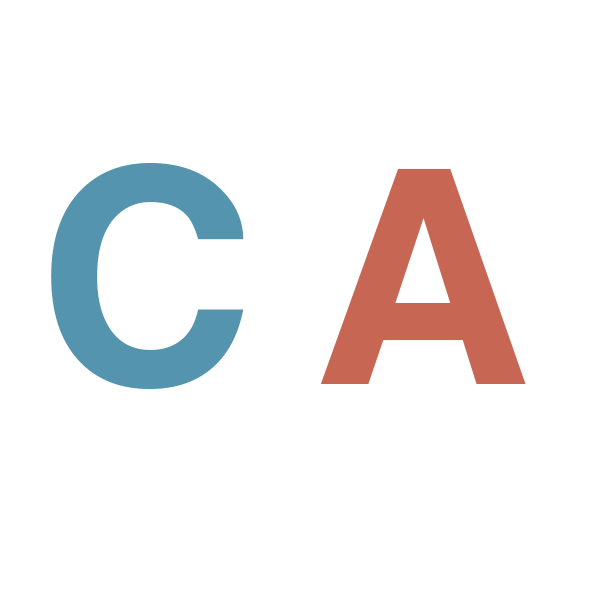
<style>
.page{position:relative;width:591px;height:591px;background:#ffffff}
.page>*{position:absolute;margin:0}
.t1{font:300px "CTCuHeiSJ";letter-spacing:0.2em;color:#5494af}
.t2{font:300px "CTCuHeiSJ";letter-spacing:0.2em;color:#c66653}
</style>
<div class="page">
<p class="t1" style="left:51px;top:162px;width:475px;height:227px">C<span class="t2">A</span></p>
</div>
